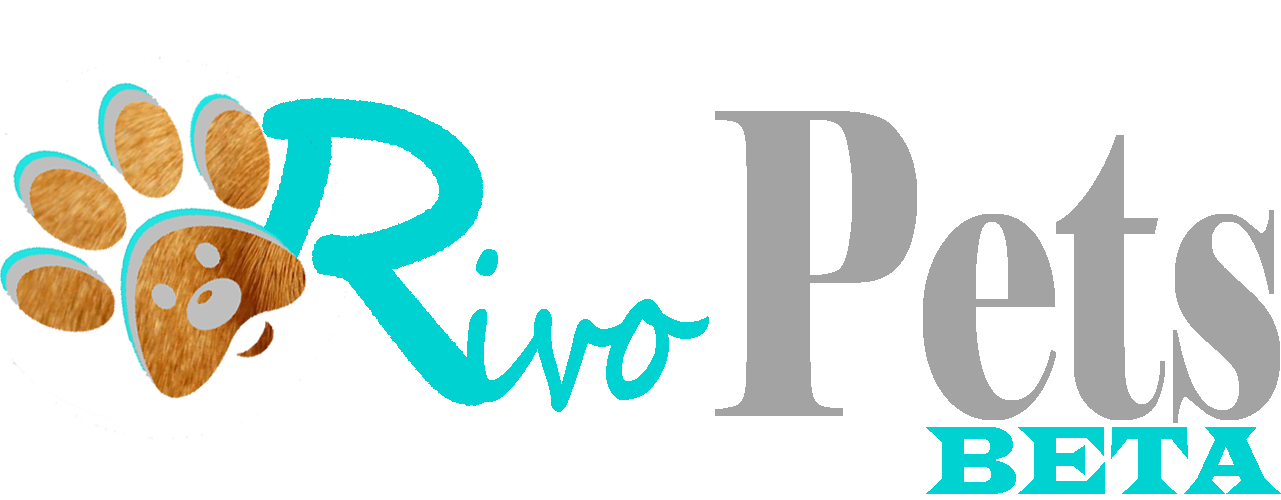
<style>
.page{position:relative;width:1281px;height:500px;background:#ffffff}
.page>*{position:absolute;margin:0}
.t1{font:416.9px "Elephant-Regular";color:#a3a3a3;scale:0.62 1}
.t2{font:199.9px "SegoeScript-Bold";color:#00d2d1;scale:0.7 1}
.t3{font:100px "LatinWide";color:#00d2d1;scale:0.66 1}
</style>
<div class="page">
<p class="t1" style="left:715px;top:111px;width:565px;height:312px">Pets</p>
<p class="t2" style="left:467px;top:249px;width:242px;height:163px">ivo</p>
<p class="t3" style="left:926px;top:427px;width:355px;height:67px">BETA</p>
</div>
